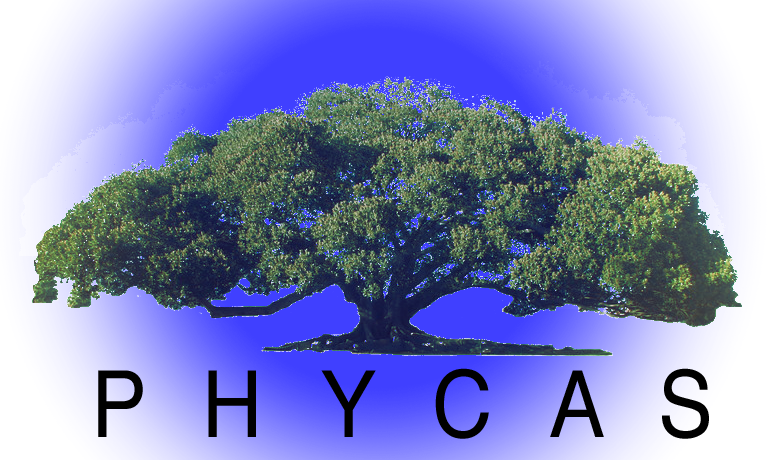
<style>
.page{position:relative;width:767px;height:460px}
.page>*{position:absolute;margin:0}
.t1{font:92.4px "Helvetica";letter-spacing:0.2em;color:#000000;scale:0.91 1}
</style>
<div class="page">
<p class="t1" style="left:98px;top:368px;width:611px;height:71px">P H Y C A S</p>
</div>
